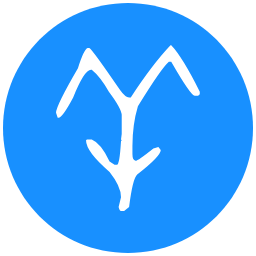
<style>
.page{position:relative;width:256px;height:256px;background:#1890ff}
.page>*{position:absolute;margin:0}
.t1{font:238px "jiaguwenziti";color:#ffffff}
</style>
<div class="page">
<p class="t1" style="left:56px;top:45px;width:144px;height:166px">羊</p>
</div>
